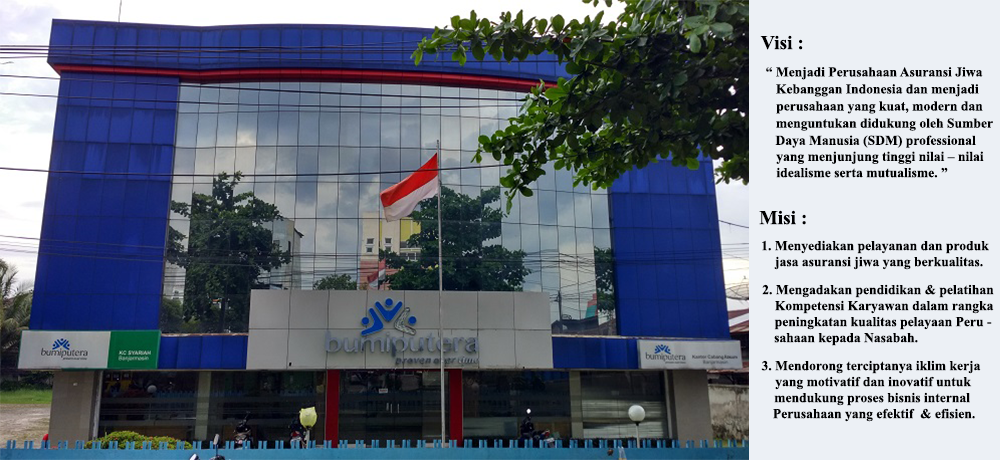
<style>
.page{position:relative;width:1000px;height:460px;background:#ecf0f5}
.page>*{position:absolute;margin:0}
.t1{font:19.4px "TimesNewRomanPS-BoldMT";color:#000001}
.t2{font:13.6px "TimesNewRomanPS-BoldMT";color:#000001}
</style>
<div class="page">
<p class="t1" style="left:760px;top:35px;width:43px;height:15px">Visi :</p>
<p class="t2" style="left:766px;top:67px;width:217px;height:13px">“ Menjadi Perusahaan Asuransi Jiwa</p>
<p class="t2" style="left:776px;top:84px;width:203px;height:13px">Kebanggan Indonesia dan menjadi</p>
<p class="t2" style="left:776px;top:101px;width:207px;height:13px">perusahaan yang kuat, modern dan</p>
<p class="t2" style="left:776px;top:118px;width:217px;height:13px">menguntukan didukung oleh Sumber</p>
<p class="t2" style="left:775px;top:135px;width:201px;height:13px">Daya Manusia (SDM) professional</p>
<p class="t2" style="left:776px;top:151px;width:208px;height:13px">yang menjunjung tinggi nilai – nilai</p>
<p class="t2" style="left:776px;top:167px;width:172px;height:11px">idealisme serta mutualisme. ”</p>
<p class="t1" style="left:759px;top:210px;width:47px;height:15px">Misi :</p>
<p class="t2" style="left:762px;top:240px;width:227px;height:14px">1. Menyediakan pelayanan dan produk</p>
<p class="t2" style="left:774px;top:256px;width:209px;height:14px">jasa asuransi jiwa yang berkualitas.</p>
<p class="t2" style="left:762px;top:284px;width:232px;height:14px">2. Mengadakan pendidikan &amp; pelatihan</p>
<p class="t2" style="left:775px;top:300px;width:219px;height:14px">Kompetensi Karyawan dalam rangka</p>
<p class="t2" style="left:774px;top:316px;width:218px;height:14px">peningkatan kualitas pelayaan Peru -</p>
<p class="t2" style="left:774px;top:333px;width:144px;height:13px">sahaan kepada Nasabah.</p>
<p class="t2" style="left:761px;top:360px;width:220px;height:14px">3. Mendorong terciptanya iklim kerja</p>
<p class="t2" style="left:775px;top:376px;width:197px;height:14px">yang motivatif dan inovatif untuk</p>
<p class="t2" style="left:774px;top:392px;width:196px;height:14px">mendukung proses bisnis internal</p>
<p class="t2" style="left:773px;top:408px;width:202px;height:14px">Perusahaan yang efektif  &amp; efisien.</p>
</div>
